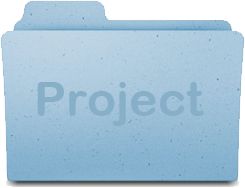
<style>
.page{position:relative;width:245px;height:188px}
.page>*{position:absolute;margin:0}
.t1{font:48px "ArialRoundedMTBold";color:#87afc8}
</style>
<div class="page">
<p class="t1" style="left:37px;top:82px;width:167px;height:44px">Project</p>
</div>
